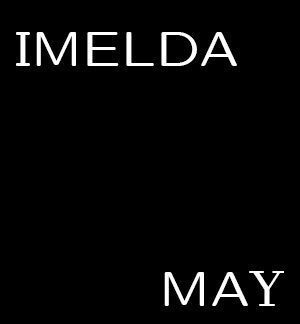
<style>
.page{position:relative;width:300px;height:324px;background:#000000}
.page>*{position:absolute;margin:0}
.t1{font:50px "Lcmss8";color:#ffffff}
.t2{font:50px "JavaneseText";color:#ffffff}
</style>
<div class="page">
<p class="t1" style="left:16px;top:32px;width:268px;height:274px">IMELDA<br><br><br><br>    MA<span class="t2">Y</span></p>
</div>
